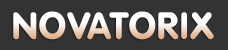
<style>
.page{position:relative;width:228px;height:50px;background:#333333}
.page>*{position:absolute;margin:0}
.t1{font:36px "MgOpenModata-Bold";letter-spacing:0.01em;text-transform:uppercase}
</style>
<div class="page">
<p class="t1" style="left:13px;top:11px;width:201px;height:29px">nOVATORIX</p>
</div>
